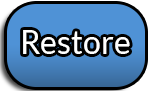
<style>
.page{position:relative;width:150px;height:91px;background:#4f92d6}
.page>*{position:absolute;margin:0}
.t1{font:32px "Lato-Regular";color:#ffffff}
</style>
<div class="page">
<p class="t1" style="left:23px;top:30px;width:107px;height:24px">Restore</p>
</div>
